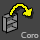
<style>
.page{position:relative;width:40px;height:40px;background:#444444}
.page>*{position:absolute;margin:0}
.t1{font:9px "Raavi";color:#afafaf}
</style>
<div class="page">
<p class="t1" style="left:21px;top:32px;width:18px;height:6px">Coro</p>
</div>
